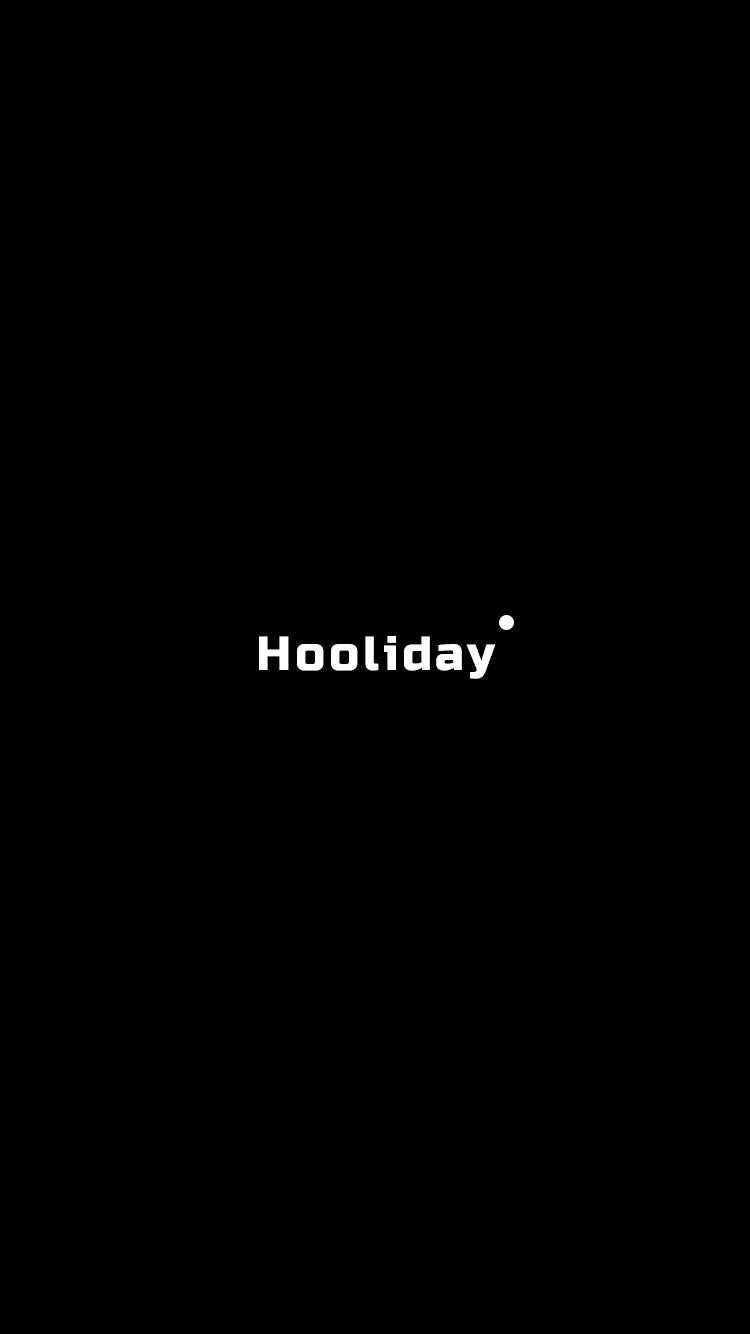
<style>
.page{position:relative;width:750px;height:1334px;background:#000000}
.page>*{position:absolute;margin:0}
.t1{font:48px "RussoOne-Regular";letter-spacing:0.075em;color:#ffffff}
</style>
<div class="page">
<p class="t1" style="left:259px;top:636px;width:237px;height:43px">Hooliday</p>
</div>
